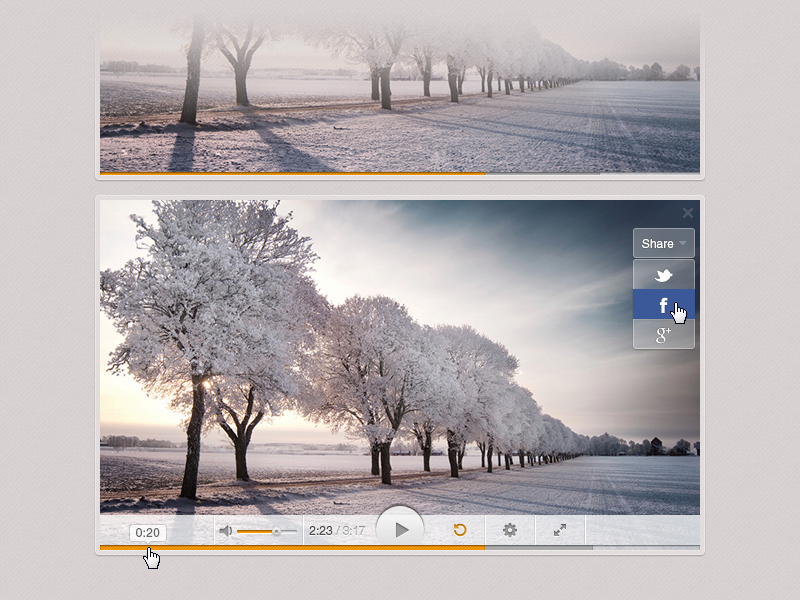
<style>
.page{position:relative;width:800px;height:600px}
.page>*{position:absolute;margin:0}
.t1{font:12px "HelveticaLTStd-Roman";color:#ffffff}
.t2{font:12px "HelveticaLTStd-Roman";letter-spacing:0.025em;color:#666666}
.t3{font:12px "HelveticaLTStd-Roman"}
</style>
<div class="page">
<p class="t1" style="left:642px;top:239px;width:32px;height:9px">Share</p>
<p class="t2" style="left:136px;top:528px;width:24px;height:9px">0:20</p>
<p class="t3" style="left:309px;top:526px;width:57px;height:9px">2:23 / 3:17</p>
</div>
